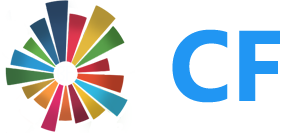
<style>
.page{position:relative;width:294px;height:133px;background:#ffffff}
.page>*{position:absolute;margin:0}
.t1{font:100px "MicrosoftPhagsPa-Bold";color:#2196f3}
</style>
<div class="page">
<p class="t1" style="left:172px;top:29px;width:108px;height:74px">CF</p>
</div>
